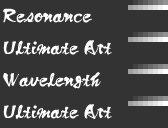
<style>
.page{position:relative;width:168px;height:128px;background:#333333}
.page>*{position:absolute;margin:0}
.t1{font:18px/32px "SamuraiStd-R";color:#fefefe}
</style>
<div class="page">
<p class="t1" style="left:3px;top:8px;width:109px;height:112px">Resonance<br>Ultimate Art<br>Wavelength<br>Ultimate Art</p>
</div>
